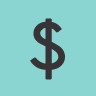
<style>
.page{position:relative;width:96px;height:96px;background:#8ad5d1}
.page>*{position:absolute;margin:0}
.t1{font:63px "CenturyGothic";letter-spacing:0.01em;color:#373337;font-weight:bold;scale:1.06 1}
</style>
<div class="page">
<p class="t1" style="left:30px;top:18px;width:35px;height:62px">$</p>
</div>
